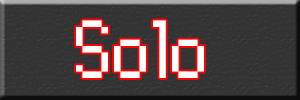
<style>
.page{position:relative;width:300px;height:100px}
.page>*{position:absolute;margin:0}
.t1{font:83.3px "Pokemon-DP";color:#ffffff}
</style>
<div class="page">
<p class="t1" style="left:76px;top:20px;width:128px;height:58px">Solo</p>
</div>
